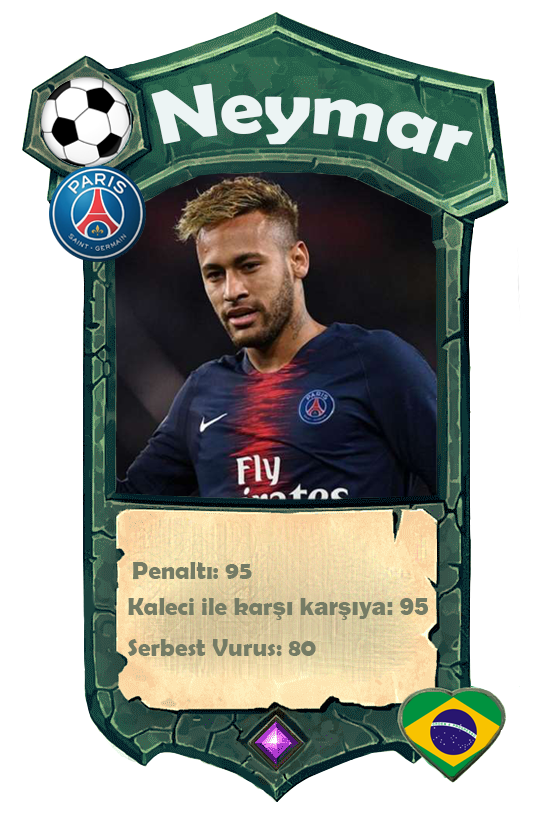
<style>
.page{position:relative;width:558px;height:814px;background:#ffffff}
.page>*{position:absolute;margin:0}
.t1{font:75.7px "BerlinSansFBDemi-Bold";color:#ecf4f4;scale:1.06 1}
.t2{font:25px "BerlinSansFBDemi-Bold";color:#747b65}
.t3{font:25px "FranklinGothic-Heavy";color:#747b65}
</style>
<div class="page">
<p class="t1" style="left:151px;top:83px;width:322px;height:79px;rotate:4deg">Neymar</p>
<p class="t2" style="left:133px;top:562px;width:119px;height:17px">Penaltı: 95</p>
<p class="t2" style="left:128px;top:598px;width:300px;height:22px">Kaleci ile kar<span class="t3">şı karşıya: 95</span></p>
<p class="t2" style="left:128px;top:639px;width:188px;height:17px">Serbest Vurus: 80</p>
</div>
